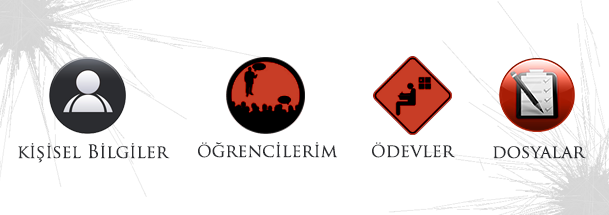
<style>
.page{position:relative;width:609px;height:215px;background:#ffffff}
.page>*{position:absolute;margin:0}
.t1{font:18px "TrajanPro-Regular";color:#2b2c30}
.t2{font:16px "TrajanPro-Regular";color:#2b2c30}
</style>
<div class="page">
<p class="t1" style="left:18px;top:143px;width:152px;height:20px">k<span class="t2">İ</span>ş<span class="t2">İ</span>sel B<span class="t2">İ</span>lg<span class="t2">İ</span>ler</p>
<p class="t1" style="left:198px;top:142px;width:140px;height:16px"><span class="t2">Ö</span>ğrenc<span class="t2">İ</span>ler<span class="t2">İ</span>m</p>
<p class="t1" style="left:372px;top:142px;width:84px;height:16px"><span class="t2">Ö</span>devler</p>
<p class="t1" style="left:493px;top:146px;width:93px;height:13px">dosyalar</p>
</div>
